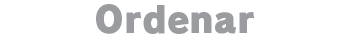
<style>
.page{position:relative;width:350px;height:40px;background:#ffffff}
.page>*{position:absolute;margin:0}
.t1{font:36px "RodinPro-UB";letter-spacing:-0.002em;color:#9a9c9f}
</style>
<div class="page">
<p class="t1" style="left:96px;top:4px;width:159px;height:30px">Ordenar</p>
</div>
